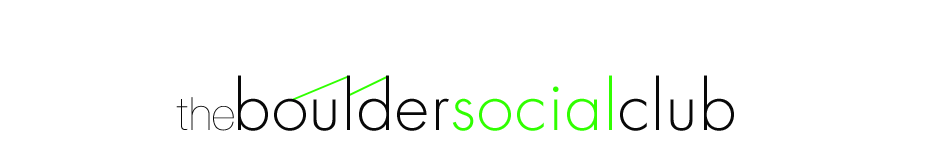
<style>
.page{position:relative;width:950px;height:149px;background:#ffffff}
.page>*{position:absolute;margin:0}
.t1{font:66px "FuturaLT-Light";letter-spacing:0.025em;color:#080808}
.t2{font:66px "FuturaLT-Light";letter-spacing:0.025em;color:#30ff00}
.t3{font:46px "HelveticaNeue-UltraLight";letter-spacing:0.015em;color:#080808}
</style>
<div class="page">
<p class="t1" style="left:238px;top:75px;width:496px;height:56px">boulder<span class="t2">social</span>club</p>
<p class="t3" style="left:176px;top:97px;width:58px;height:34px">the</p>
</div>
